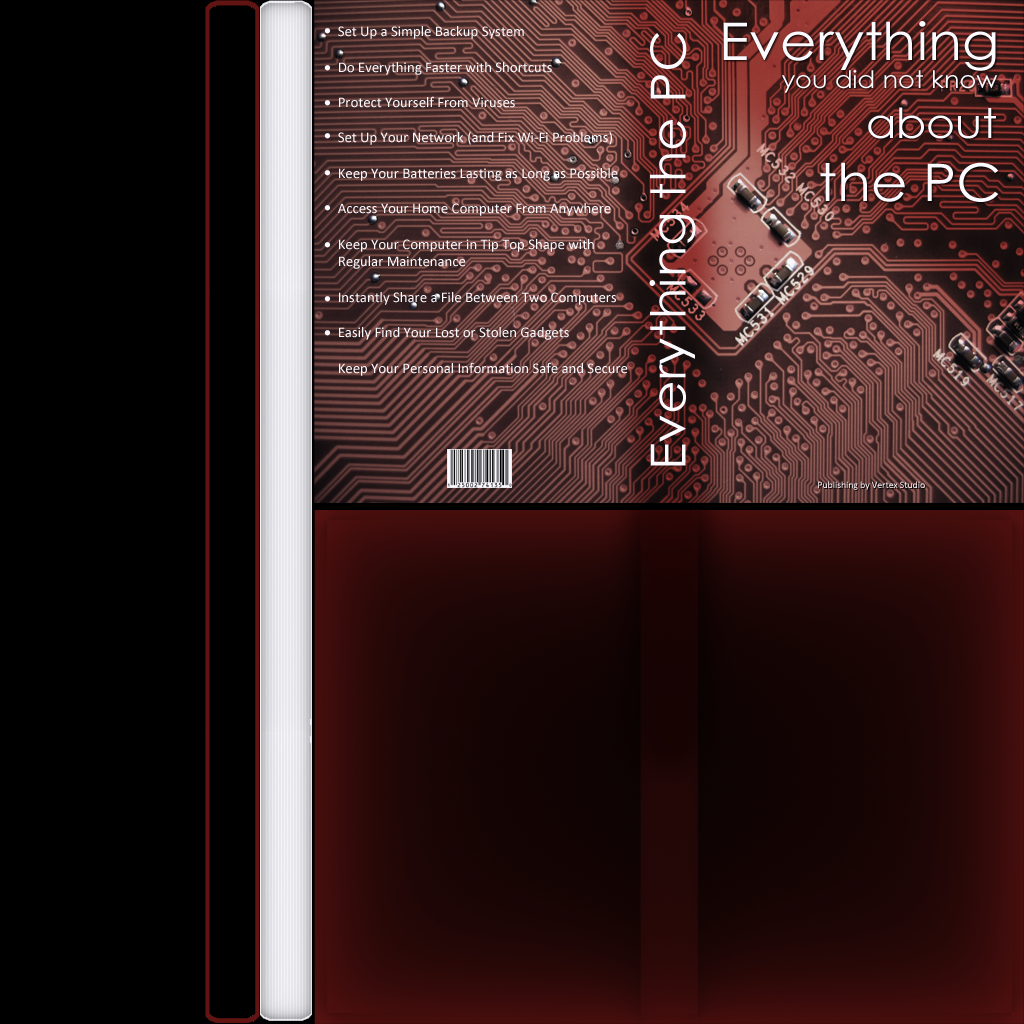
<style>
.page{position:relative;width:1024px;height:1024px;background:#000000}
.page>*{position:absolute;margin:0}
.t1{font:14.8px "Calibri";color:#ffffff}
.t2{font:24px "CenturyGothic";color:#ffffff;scale:1.07 1}
.t3{font:52.1px "CenturyGothic";color:#ffffff;scale:1.07 1}
.t4{font:41.3px "CenturyGothic";color:#ffffff;scale:1.07 1}
.t5{font:48.2px "CenturyGothic";color:#ffffff;scale:1.07 1}
.t6{font:9.7px "Calibri";color:#ffffff}
.t7{font:9.7px "Calibri";color:#000000}
</style>
<div class="page">
<p class="t1" style="left:338px;top:26px;width:290px;height:350px">Set Up a Simple Backup System<br><br>Do Everything Faster with Shortcuts<br><br>Protect Yourself From Viruses<br><br>Set Up Your Network (and Fix Wi-Fi Problems)<br><br>Keep Your Batteries Lasting as Long as Possible<br><br>Access Your Home Computer From Anywhere<br><br>Keep Your Computer in Tip Top Shape with <br>Regular Maintenance<br><br>Instantly Share a File Between Two Computers<br><br>Easily Find Your Lost or Stolen Gadgets<br><br>Keep Your Personal Information Safe and Secure</p>
<p class="t2" style="left:723px;top:21px;width:276px;height:181px"><span class="t3">Everything <br>          </span>you did not know <br><span class="t4">          about <br>        </span><span class="t3">the PC</span></p>
<p class="t5" style="left:649px;top:33px;width:47px;height:433px;rotate:-90deg">Everything the PC</p>
<p class="t6" style="left:818px;top:481px;width:107px;height:9px">Publishing by Vertex Studio</p>
<p class="t7" style="left:819px;top:482px;width:107px;height:9px">Publishing by Vertex Studio</p>
</div>
